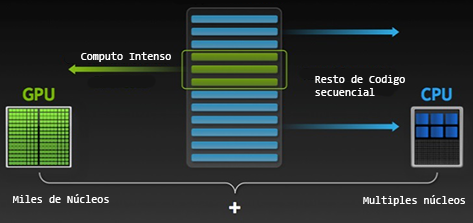
<style>
.page{position:relative;width:473px;height:223px}
.page>*{position:absolute;margin:0}
.t1{font:11px "Consolas";color:#ffffff}
</style>
<div class="page">
<p class="t1" style="left:81px;top:52px;width:90px;height:10px">Computo Intenso</p>
<p class="t1" style="left:315px;top:75px;width:90px;height:21px">Resto de Codigo<br>secuencial</p>
<p class="t1" style="left:12px;top:194px;width:97px;height:9px">Miles de Núcleos</p>
<p class="t1" style="left:363px;top:195px;width:102px;height:11px">Multiples núcleos</p>
</div>
